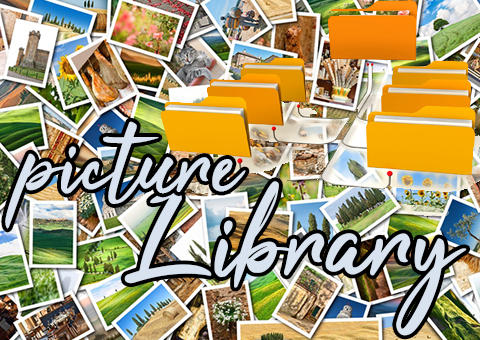
<style>
.page{position:relative;width:480px;height:340px}
.page>*{position:absolute;margin:0}
.t1{font:100px "Tahu!";color:#d9e2ef}
.t2{font:120px "Tahu!";color:#d9e2ef}
</style>
<div class="page">
<p class="t1" style="left:5px;top:121px;width:241px;height:108px">picture</p>
<p class="t2" style="left:124px;top:181px;width:343px;height:155px">Library</p>
</div>
